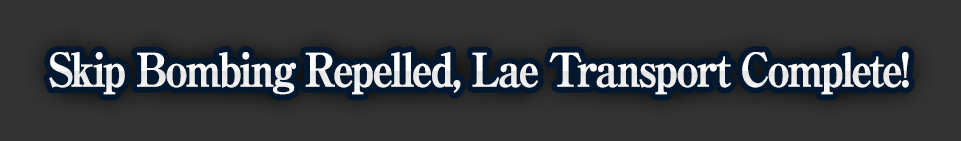
<style>
.page{position:relative;width:961px;height:141px;background:#333333}
.page>*{position:absolute;margin:0}
.t1{font:46px "RyuminPro-ExBold";letter-spacing:-0.08em;color:#ffffff;font-weight:bold;scale:0.9 1}
</style>
<div class="page">
<p class="t1" style="left:49px;top:52px;width:860px;height:43px">Skip Bombing Repelled, Lae Transport Complete!</p>
</div>
